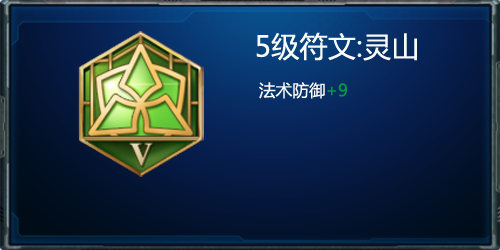
<style>
.page{position:relative;width:500px;height:250px}
.page>*{position:absolute;margin:0}
.t1{font:28.3px "MicrosoftYaHei";color:#f7faf8}
.t2{font:16.7px "MicrosoftYaHei";color:#f7faf8}
.t3{font:16.7px "MicrosoftYaHei";color:#009944}
</style>
<div class="page">
<p class="t1" style="left:256px;top:32px;width:161px;height:67px;text-align:center">5级符文:灵山<span class="t2"><br>  法术防御</span><span class="t3">+9</span></p>
</div>
